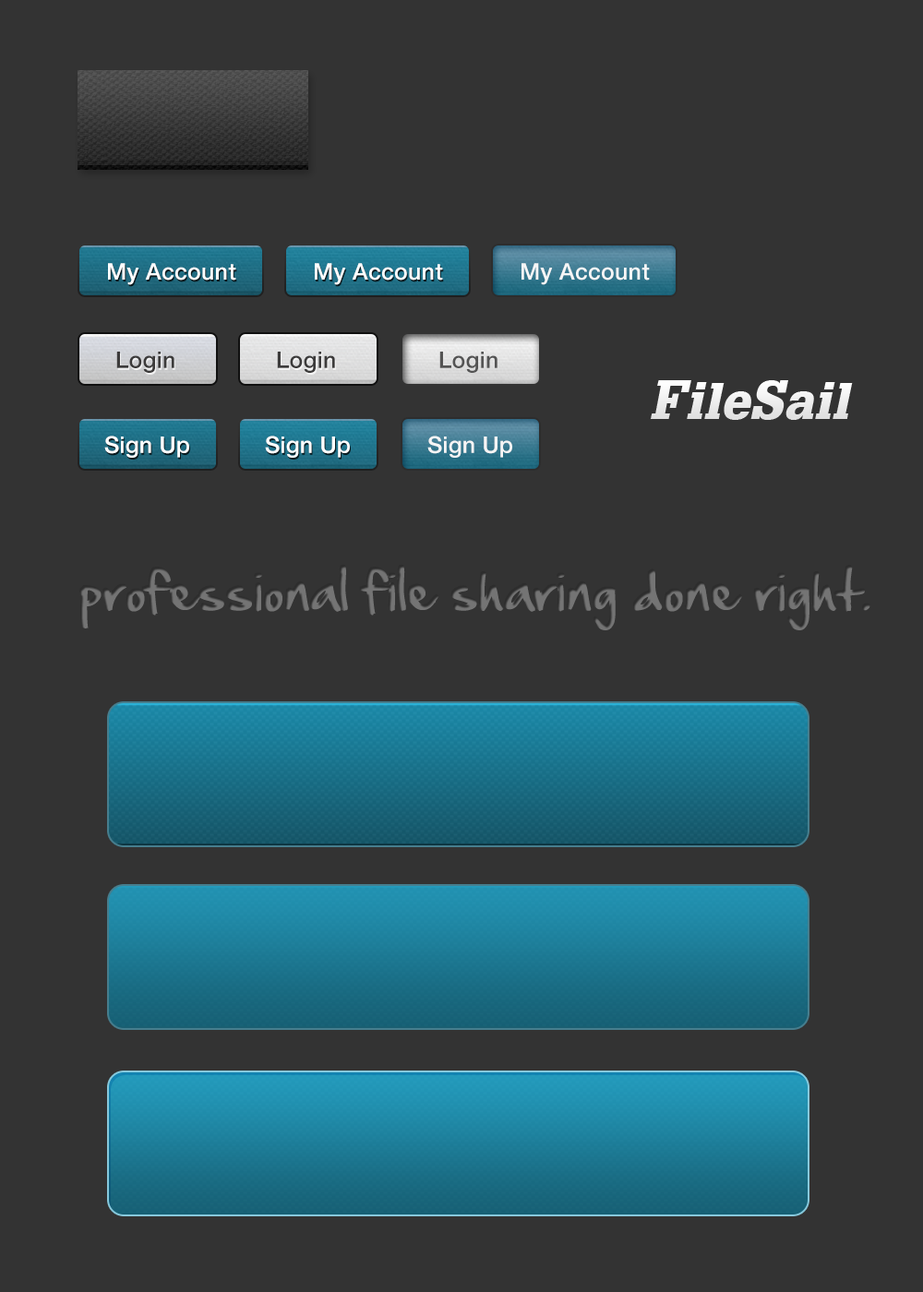
<style>
.page{position:relative;width:923px;height:1292px;background:#333333}
.page>*{position:absolute;margin:0}
.t1{font:23.1px "HelveticaNeue-Medium";letter-spacing:0.01em;color:#ffffff}
.t2{font:23.1px "HelveticaNeue-Medium";letter-spacing:0.01em;color:#f6f6f6}
.t3{font:23.1px "HelveticaNeue-Medium";letter-spacing:0.01em;color:#3c3b3b}
.t4{font:23.1px "HelveticaNeue-Medium";letter-spacing:0.01em;color:#545454}
.t5{font:48.7px "GlyphaLT-BlackOblique";letter-spacing:0.025em;color:#e1e1e1}
.t6{font:53.8px "GlyphaLT-BlackOblique";letter-spacing:0.025em;color:#e1e1e1}
.t7{font:23.1px "HelveticaNeue-Medium";letter-spacing:0.01em;color:#f6f5f5}
.t8{font:48.7px "HandOfSean";color:#747474}
</style>
<div class="page">
<p class="t1" style="left:108px;top:263px;width:128px;height:22px">My Account</p>
<p class="t1" style="left:315px;top:263px;width:128px;height:22px">My Account</p>
<p class="t2" style="left:521px;top:263px;width:129px;height:22px">My Account</p>
<p class="t3" style="left:116px;top:352px;width:58px;height:21px">Login</p>
<p class="t3" style="left:277px;top:352px;width:58px;height:21px">Login</p>
<p class="t4" style="left:439px;top:352px;width:58px;height:21px">Login</p>
<p class="t5" style="left:650px;top:380px;width:203px;height:40px"><span class="t6">F</span>ile<span class="t6">S</span>ail</p>
<p class="t1" style="left:104px;top:436px;width:85px;height:22px">Sign Up</p>
<p class="t1" style="left:265px;top:436px;width:85px;height:22px">Sign Up</p>
<p class="t7" style="left:427px;top:436px;width:85px;height:22px">Sign Up</p>
<p class="t8" style="left:79px;top:564px;width:791px;height:66px">professional file sharing done right.</p>
</div>
